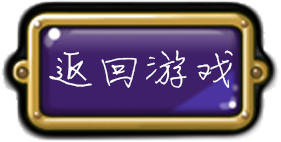
<style>
.page{position:relative;width:281px;height:142px}
.page>*{position:absolute;margin:0}
.t1{font:48px "FZJLJW--GB1-0";color:#ffffff}
</style>
<div class="page">
<p class="t1" style="left:49px;top:50px;width:184px;height:38px">返回游戏</p>
</div>
